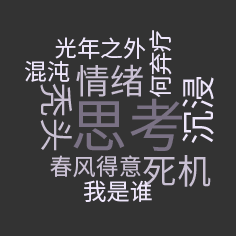
<style>
.page{position:relative;width:236px;height:236px;background:#333333}
.page>*{position:absolute;margin:0}
.t1{font:23.1px "SourceHanSansCN-Regular";color:#eee6fb}
.t2{font:34.7px "SourceHanSansCN-Regular";color:#c9c0d3}
.t3{font:34.7px "SourceHanSansCN-Regular";color:#eee6fb}
.t4{font:57.8px "SourceHanSansCN-Regular";color:#7a7184}
.t5{font:23.1px "SourceHanSansCN-Regular";color:#c9c0d3}
</style>
<div class="page">
<p class="t1" style="left:149px;top:30px;width:23px;height:67px;rotate:-90deg">何弃疗</p>
<p class="t1" style="left:55px;top:37px;width:91px;height:23px">光年之外</p>
<p class="t1" style="left:25px;top:60px;width:45px;height:22px">混沌</p>
<p class="t2" style="left:76px;top:64px;width:67px;height:33px">情绪</p>
<p class="t3" style="left:182px;top:77px;width:32px;height:66px;rotate:-90deg">沉浸</p>
<p class="t2" style="left:40px;top:83px;width:32px;height:68px;rotate:90deg">秃头</p>
<p class="t4" style="left:73px;top:98px;width:109px;height:53px">思考</p>
<p class="t5" style="left:50px;top:155px;width:91px;height:23px">春风得意</p>
<p class="t2" style="left:143px;top:155px;width:68px;height:32px">死机</p>
<p class="t1" style="left:84px;top:180px;width:68px;height:22px">我是谁</p>
</div>
